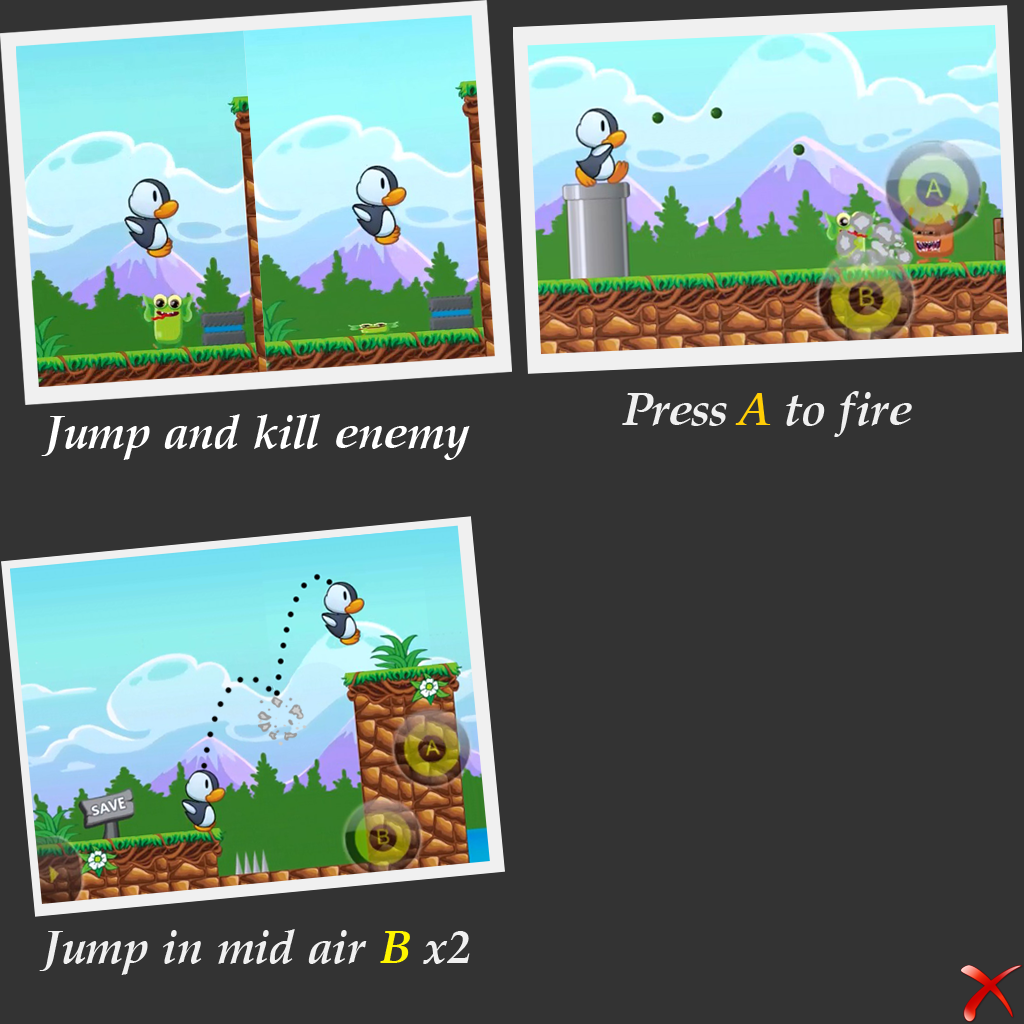
<style>
.page{position:relative;width:1024px;height:1024px;background:#333333}
.page>*{position:absolute;margin:0}
.t1{font:45.3px "VNI-Palatin-Bold-Italic";color:#f0f0f0}
.t2{font:45.3px "VNI-Palatin-Bold-Italic";color:#ffcd05}
.t3{font:45.3px "VNI-Palatin-Bold-Italic";color:#ffffff}
.t4{font:45.3px "VNI-Palatin-Bold-Italic";color:#fff600}
</style>
<div class="page">
<p class="t1" style="left:622px;top:391px;width:290px;height:46px">Press <span class="t2">A</span> to fire</p>
<p class="t3" style="left:41px;top:414px;width:429px;height:46px">Jump and kill enemy</p>
<p class="t1" style="left:39px;top:929px;width:431px;height:46px">Jump in mid air <span class="t4">B</span> x2</p>
</div>
